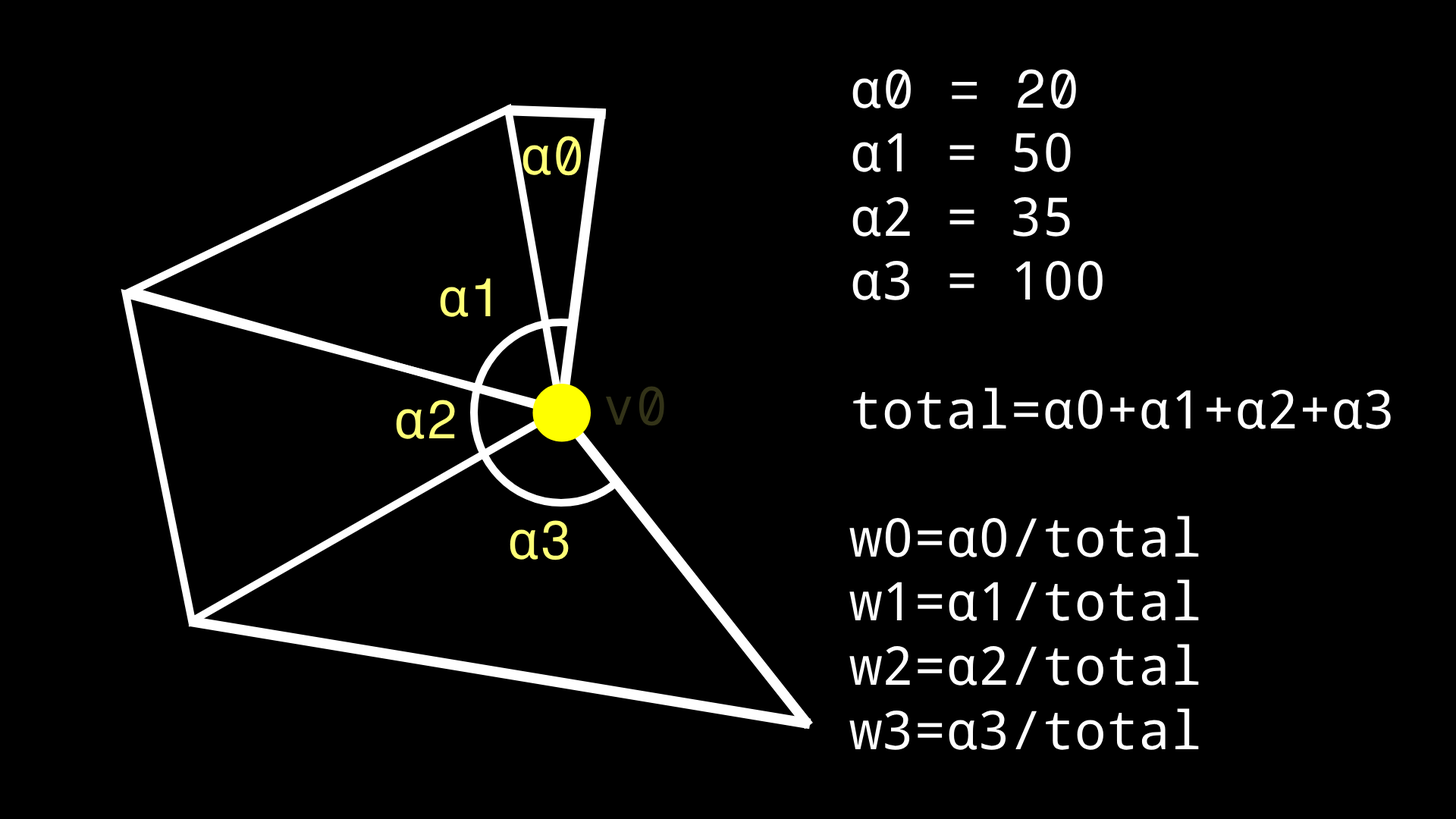
<style>
.page{position:relative;width:1456px;height:819px;background:#000000}
.page>*{position:absolute;margin:0}
.t1{font:53.5px "DroidSansMono";color:#ffffff}
.t2{font:53.5px "FragmentMono-Regular";color:#ffffff}
.t3{font:53.5px "DroidSansMono";color:#ffff76}
.t4{font:53.5px "FragmentMono-Regular";color:#ffff76}
.t5{font:53.5px "FragmentMono-Regular";color:#333318}
</style>
<div class="page">
<p class="t1" style="left:849px;top:69px;width:542px;height:681px">α<span class="t2">0 = 20<br></span>α1 = 50<br>α2 = 35<br>α3 = 100<br><br>total=α0+α1+α2+α3<br><br>w0=α0/total<br>w1=α1/total<br>w2=α2/total<br>w3=α3/total</p>
<p class="t3" style="left:522px;top:136px;width:60px;height:40px">α<span class="t4">0</span></p>
<p class="t3" style="left:440px;top:278px;width:51px;height:39px">α<span class="t4">1</span></p>
<p class="t5" style="left:606px;top:386px;width:58px;height:40px">v0</p>
<p class="t3" style="left:396px;top:400px;width:59px;height:39px">α<span class="t4">2</span></p>
<p class="t3" style="left:510px;top:520px;width:59px;height:40px">α<span class="t4">3</span></p>
</div>
